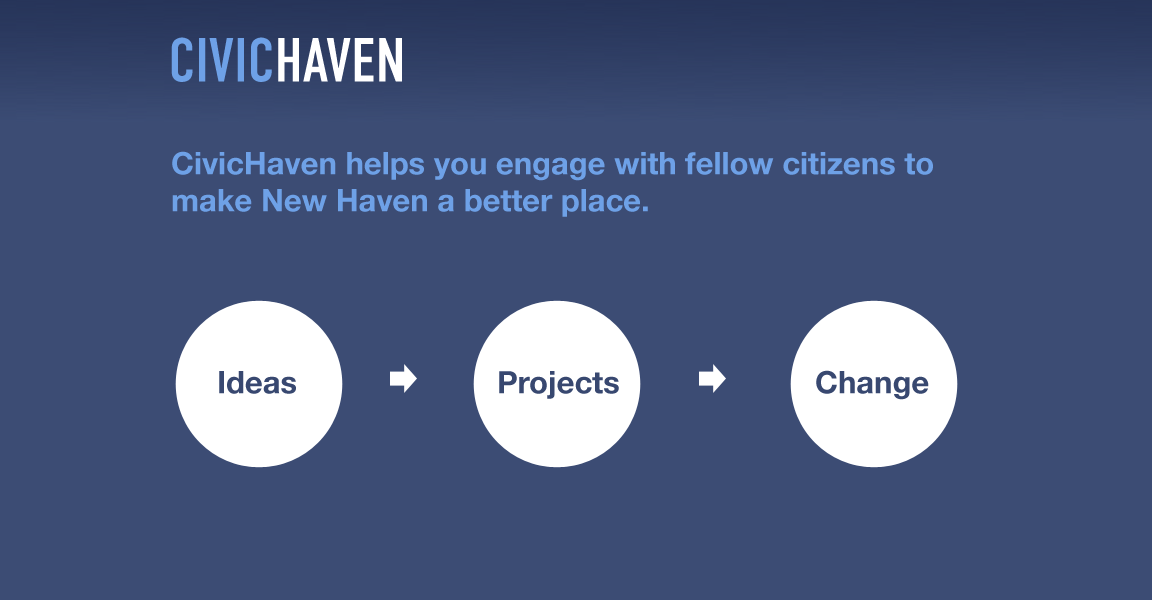
<style>
.page{position:relative;width:1152px;height:600px;background:#3c4c74}
.page>*{position:absolute;margin:0}
.t1{font:62px "DINCondensedC";color:#6ea1e7}
.t2{font:62px "DINCondensedC";color:#ffffff}
.t3{font:31px "HelveticaNeue-Bold";color:#6ea1e7}
.t4{font:31px "HelveticaNeue-Bold";color:#384870}
</style>
<div class="page">
<p class="t1" style="left:171px;top:37px;width:231px;height:45px">CIVIC<span class="t2">HAVEN</span></p>
<p class="t3" style="left:172px;top:151px;width:761px;height:66px">CivicHaven helps you engage with fellow citizens to make New Haven a better place.</p>
<p class="t4" style="left:219px;top:371px;width:77px;height:23px">Ideas</p>
<p class="t4" style="left:499px;top:371px;width:120px;height:28px">Projects</p>
<p class="t4" style="left:816px;top:370px;width:113px;height:30px">Change</p>
</div>
